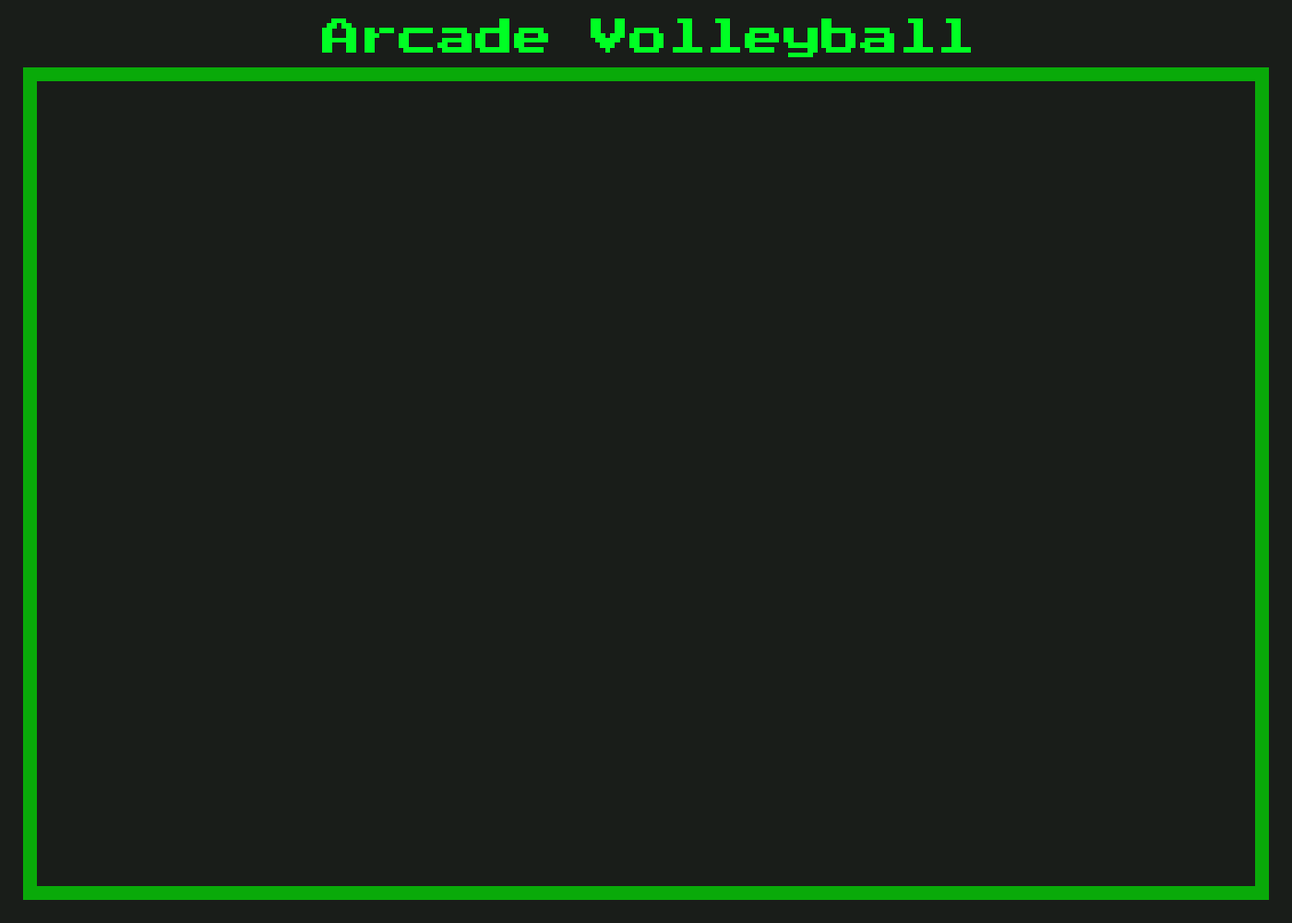
<style>
.page{position:relative;width:1292px;height:923px;background:#191d19}
.page>*{position:absolute;margin:0}
.t1{font:38.5px "PressStart2P";color:#00ff24}
</style>
<div class="page">
<p class="t1" style="left:322px;top:18px;width:649px;height:39px">Arcade Volleyball</p>
</div>
